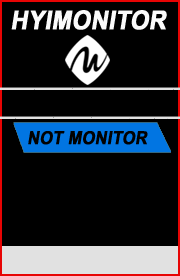
<style>
.page{position:relative;width:180px;height:276px;background:#000000}
.page>*{position:absolute;margin:0}
.t1{font:26px "Arial-BoldMT";color:#fbfbfb;font-weight:bold;font-style:italic;scale:0.9 1}
.t2{font:18px "Arial-BoldMT";color:#010101;font-weight:bold;font-style:italic;scale:0.9 1}
</style>
<div class="page">
<p class="t1" style="left:11px;top:10px;width:156px;height:20px">HYIMONITOR</p>
<p class="t2" style="left:28px;top:131px;width:120px;height:14px">NOT MONITOR</p>
</div>
